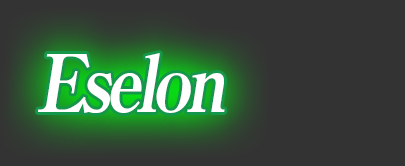
<style>
.page{position:relative;width:405px;height:166px;background:#333333}
.page>*{position:absolute;margin:0}
.t1{font:80px "RyuminPro-ExBold";letter-spacing:-0.08em;color:#ffffff;font-style:italic;scale:0.9 1}
</style>
<div class="page">
<p class="t1" style="left:38px;top:53px;width:187px;height:60px">Eselon</p>
</div>
